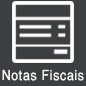
<style>
.page{position:relative;width:86px;height:86px;background:#3c3f41}
.page>*{position:absolute;margin:0}
.t1{font:13.7px "Helvetica-Normal";letter-spacing:0.06em;color:#ffffff;scale:0.89 1}
</style>
<div class="page">
<p class="t1" style="left:2px;top:69px;width:82px;height:12px">Notas Fiscais</p>
</div>
